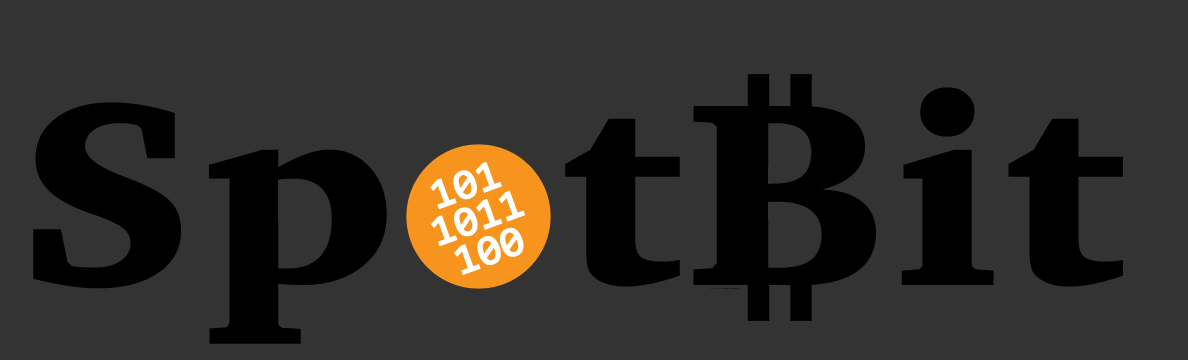
<style>
.page{position:relative;width:1188px;height:360px;background:#333333}
.page>*{position:absolute;margin:0}
.t1{font:266.7px "Charter-Black";letter-spacing:0.02em;color:#000000;scale:1.1 1}
.t2{font:43.8px/35px "Consolas-Bold";color:#ffffff}
</style>
<div class="page">
<p class="t1" style="left:33px;top:87px;width:1090px;height:257px">Sp  tBit</p>
<p class="t2" style="left:430px;top:162px;width:96px;height:113px;text-align:center;rotate:-20deg">101<br>1011<br>100</p>
</div>
